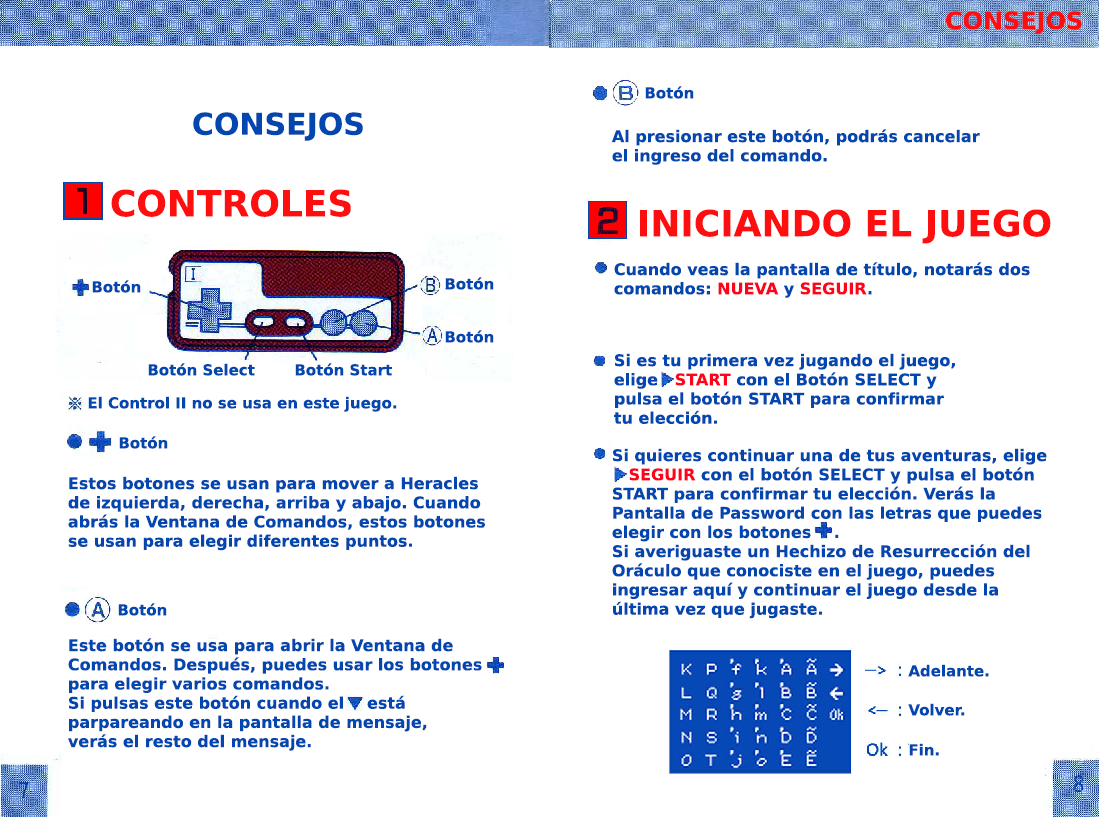
<style>
.page{position:relative;width:1099px;height:817px;background:#ffffff}
.page>*{position:absolute;margin:0}
.t1{font:24px "PrimaSansBT-Bold";color:#ff0e0f}
.t2{font:15px "PrimaSansBT-Bold";color:#0247af}
.t3{font:30px "PrimaSansBT-Bold";color:#0247af}
.t4{font:16px "PrimaSansBT-Bold";color:#0247af}
.t5{font:36px "PrimaSansBT-Bold";color:#ff0e0f}
.t6{font:16px "PrimaSansBT-Bold";color:#ff031c}
</style>
<div class="page">
<p class="t1" style="left:946px;top:11px;width:136px;height:23px">CONSEJOS</p>
<p class="t2" style="left:645px;top:86px;width:49px;height:13px">Botón</p>
<p class="t3" style="left:193px;top:112px;width:170px;height:29px">CONSEJOS</p>
<p class="t4" style="left:611px;top:129px;width:369px;height:36px">Al presionar este botón, podrás cancelar<br>el ingreso del comando.</p>
<p class="t5" style="left:111px;top:189px;width:240px;height:28px">CONTROLES</p>
<p class="t5" style="left:640px;top:209px;width:411px;height:35px">INICIANDO EL JUEGO</p>
<p class="t4" style="left:614px;top:262px;width:416px;height:36px">Cuando veas la pantalla de título, notarás dos<br>comandos: <span class="t6">NUEVA </span>y <span class="t6">SEGUIR</span>.</p>
<p class="t2" style="left:92px;top:280px;width:49px;height:13px">Botón</p>
<p class="t2" style="left:445px;top:277px;width:49px;height:13px">Botón</p>
<p class="t2" style="left:445px;top:330px;width:49px;height:13px">Botón</p>
<p class="t4" style="left:614px;top:353px;width:341px;height:71px">Si es tu primera vez jugando el juego,<br>elige   <span class="t6">START</span> con el Botón SELECT y <br>pulsa el botón START para confirmar<br>tu elección.</p>
<p class="t2" style="left:148px;top:363px;width:107px;height:13px">Botón Select</p>
<p class="t2" style="left:295px;top:363px;width:97px;height:13px">Botón Start</p>
<p class="t2" style="left:88px;top:396px;width:309px;height:16px">El Control II no se usa en este juego.</p>
<p class="t2" style="left:119px;top:436px;width:49px;height:13px">Botón</p>
<p class="t4" style="left:612px;top:448px;width:435px;height:171px">Si quieres continuar una de tus aventuras, elige<br><span class="t6">   SEGUIR </span>con el botón SELECT y pulsa el botón<br>START para confirmar tu elección. Verás la<br>Pantalla de Password con las letras que puedes<br>elegir con los botones    .<br>Si averiguaste un Hechizo de Resurrección del<br>Oráculo que conociste en el juego, puedes <br>ingresar aquí y continuar el juego desde la <br>última vez que jugaste.</p>
<p class="t4" style="left:68px;top:476px;width:418px;height:75px">Estos botones se usan para mover a Heracles<br>de izquierda, derecha, arriba y abajo. Cuando<br>abrás la Ventana de Comandos, estos botones<br>se usan para elegir diferentes puntos.</p>
<p class="t2" style="left:118px;top:603px;width:49px;height:13px">Botón</p>
<p class="t4" style="left:68px;top:638px;width:414px;height:113px">Este botón se usa para abrir la Ventana de<br>Comandos. Después, puedes usar los botones<br>para elegir varios comandos.<br>Si pulsas este botón cuando el   está <br>parpareando en la pantalla de mensaje, <br>verás el resto del mensaje.</p>
<p class="t2" style="left:908px;top:664px;width:81px;height:13px">Adelante.</p>
<p class="t2" style="left:908px;top:703px;width:57px;height:13px">Volver.</p>
<p class="t2" style="left:909px;top:743px;width:30px;height:13px">Fin.</p>
</div>
